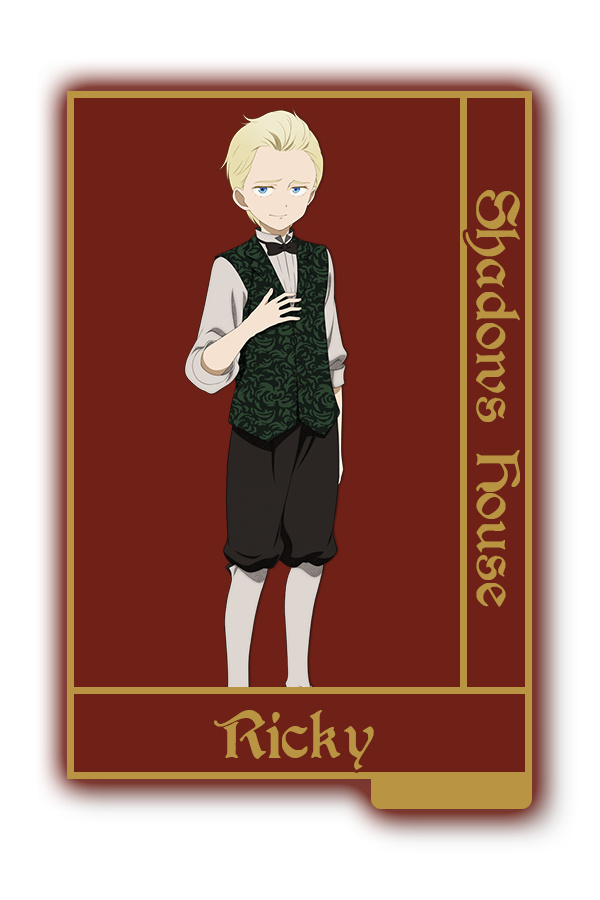
<style>
.page{position:relative;width:600px;height:900px;background:#6f2117}
.page>*{position:absolute;margin:0}
.t1{font:67.9px "Augusta-Regular";color:#b89443}
.t2{font:75px "Augusta-Regular";color:#b89443}
</style>
<div class="page">
<p class="t1" style="left:465px;top:190px;width:55px;height:417px;rotate:90deg">Shadows House</p>
<p class="t2" style="left:214px;top:710px;width:160px;height:60px">Ricky</p>
</div>
